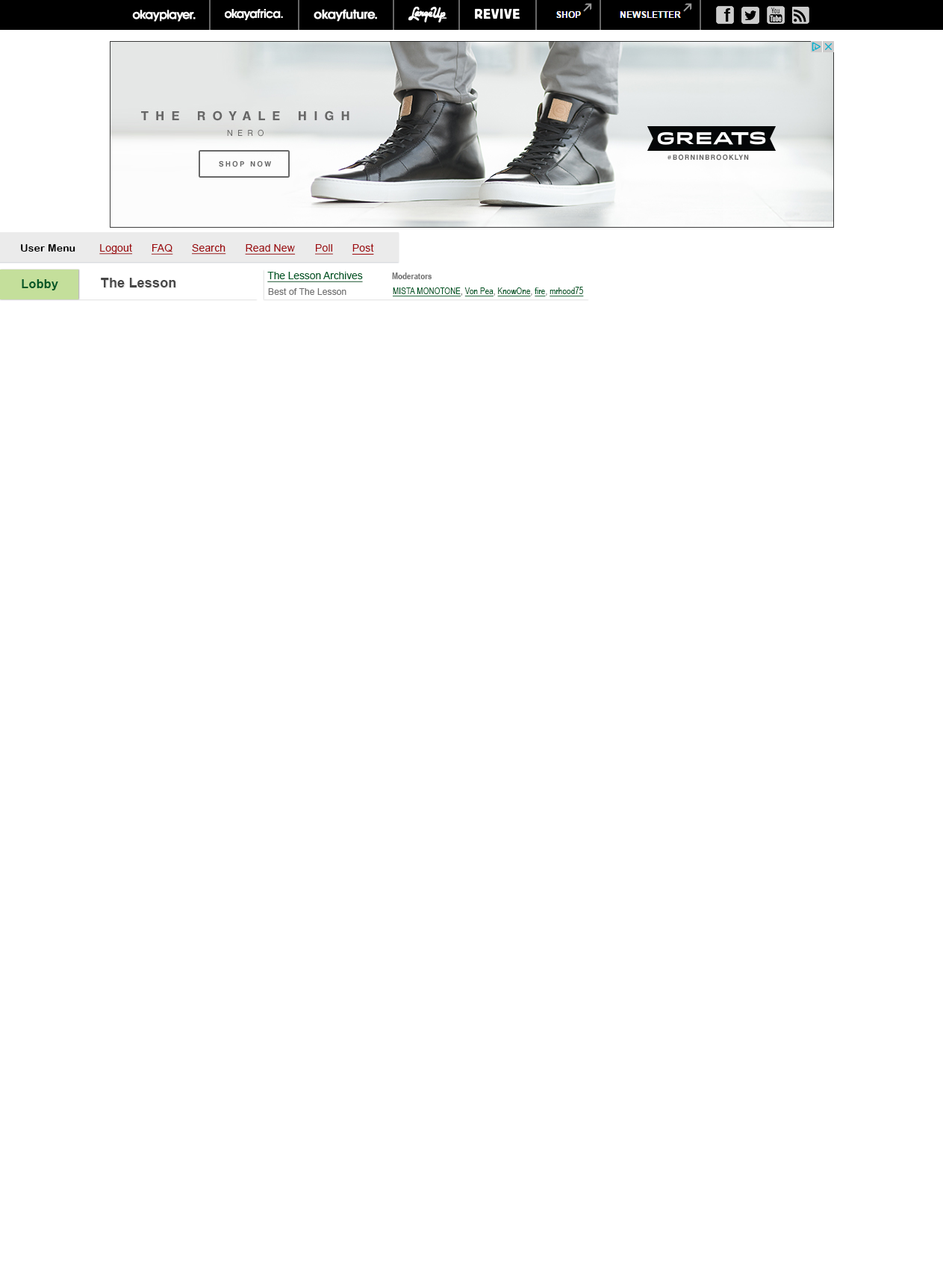
<style>
.page{position:relative;width:943px;height:1264px;background:#ffffff}
.page>*{position:absolute;margin:0}
.t1{font:10.5px "ArialRoundedMTBold";letter-spacing:0.01em;color:#000000}
.t2{font:10.5px "ArialMT";letter-spacing:0.01em;color:#9e0b0f;text-decoration:underline}
.t3{font:11.9px "Arial-BoldMT";letter-spacing:0.025em;color:#005826}
.t4{font:13.4px "Arial-BoldMT";letter-spacing:0.01em;color:#464646}
.t5{font:10.5px "ArialMT";letter-spacing:-0.01em;color:#005826;text-decoration:underline}
.t6{font:9px "ArialNarrow-Bold";color:#707070}
.t7{font:9px "ArialMT";letter-spacing:0.01em;color:#707070}
.t8{font:9px "ArialNarrow";letter-spacing:0.01em;color:#005826;text-decoration:underline}
.t9{font:9px "ArialNarrow";letter-spacing:0.01em;color:#005826}
</style>
<div class="page">
<p class="t1" style="left:21px;top:244px;width:54px;height:8px">User Menu</p>
<p class="t2" style="left:99px;top:243px;width:34px;height:12px">Logout</p>
<p class="t2" style="left:151px;top:244px;width:22px;height:11px">FAQ</p>
<p class="t2" style="left:192px;top:244px;width:34px;height:11px">Search</p>
<p class="t2" style="left:245px;top:244px;width:51px;height:11px">Read New</p>
<p class="t2" style="left:315px;top:244px;width:18px;height:11px">Poll</p>
<p class="t2" style="left:352px;top:243px;width:22px;height:12px">Post</p>
<p class="t3" style="left:22px;top:279px;width:36px;height:11px">Lobby</p>
<p class="t4" style="left:101px;top:278px;width:74px;height:10px">The Lesson</p>
<p class="t5" style="left:267px;top:272px;width:96px;height:10px">The Lesson Archives</p>
<p class="t6" style="left:392px;top:273px;width:40px;height:6px">Moderators</p>
<p class="t7" style="left:268px;top:288px;width:79px;height:7px">Best of The Lesson</p>
<p class="t8" style="left:393px;top:287px;width:191px;height:9px">MISTA MONOTONE<span class="t9">, </span>Von Pea<span class="t9">, </span>KnowOne<span class="t9">, </span>fire<span class="t9">, </span>mrhood75</p>
</div>
